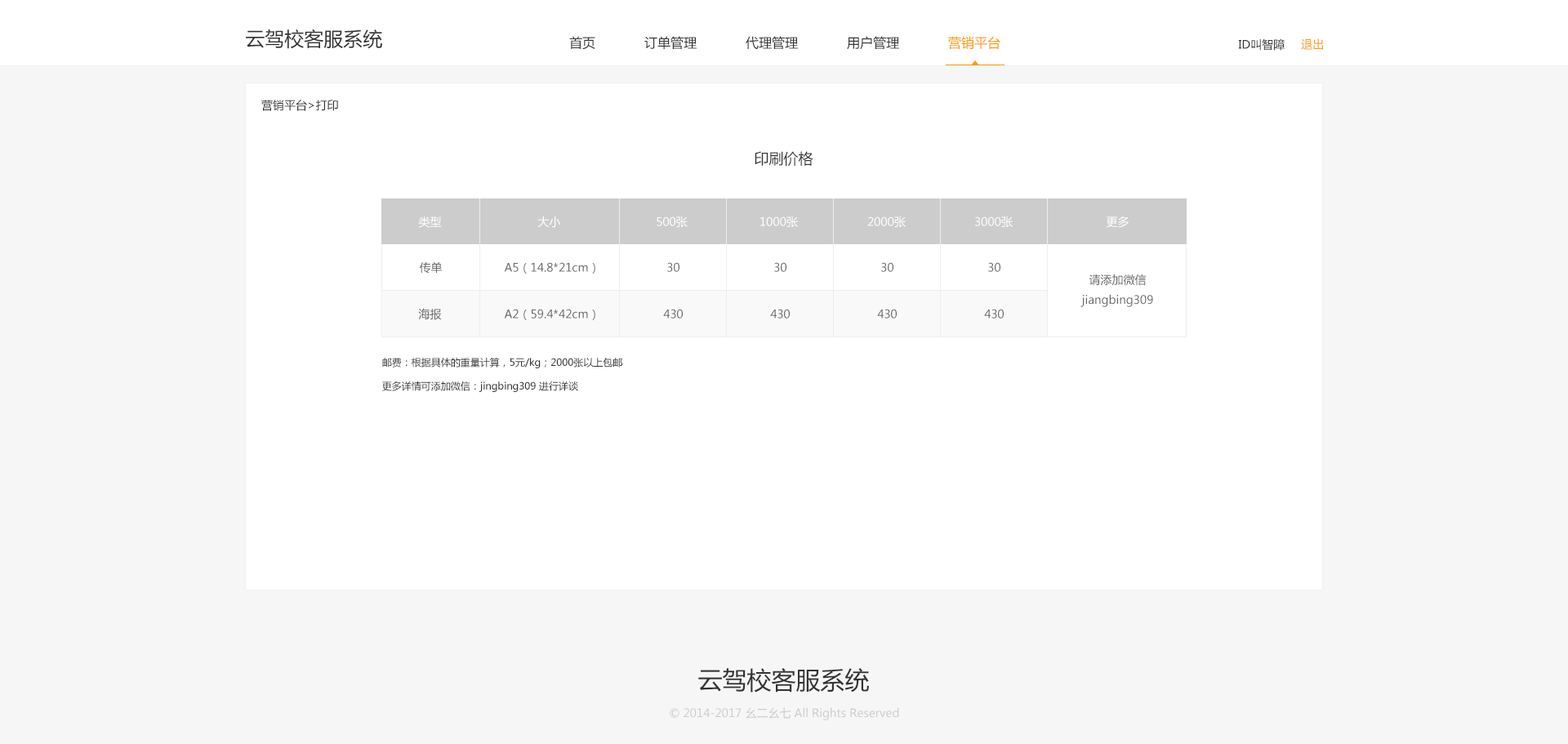
<style>
.page{position:relative;width:1568px;height:744px;background:#ffffff}
.page>*{position:absolute;margin:0}
.t1{font:19.6px "MicrosoftYaHei";color:#333333}
.t2{font:13.1px "MicrosoftYaHei";color:#333333}
.t3{font:13.1px "MicrosoftYaHei";color:#ff9900}
.t4{font:11.4px "MicrosoftYaHei";color:#333333}
.t5{font:11.4px "MicrosoftYaHei";color:#ff9900}
.t6{font:14.7px "MicrosoftYaHei";color:#333333}
.t7{font:11.4px "MicrosoftYaHei";color:#ffffff}
.t8{font:11.4px "MicrosoftYaHei";color:#666666}
.t9{font:9.8px/23.7px "MicrosoftYaHei";color:#333333}
.t10{font:24.5px "MicrosoftYaHei";color:#333333}
.t11{font:11.4px "MicrosoftYaHei";color:#cccccc}
</style>
<div class="page">
<p class="t1" style="left:246px;top:29px;width:136px;height:20px">云驾校客服系统</p>
<p class="t2" style="left:569px;top:36px;width:26px;height:14px">首页</p>
<p class="t2" style="left:644px;top:36px;width:53px;height:14px">订单管理</p>
<p class="t2" style="left:746px;top:36px;width:52px;height:13px">代理管理</p>
<p class="t2" style="left:847px;top:36px;width:52px;height:14px">用户管理</p>
<p class="t3" style="left:948px;top:36px;width:52px;height:14px">营销平台</p>
<p class="t4" style="left:1238px;top:38px;width:47px;height:13px">ID叫智障</p>
<p class="t5" style="left:1301px;top:38px;width:22px;height:12px">退出</p>
<p class="t4" style="left:261px;top:99px;width:77px;height:12px">营销平台&gt;打印</p>
<p class="t6" style="left:755px;top:151px;width:58px;height:16px">印刷价格</p>
<p class="t7" style="left:418px;top:216px;width:24px;height:12px">类型</p>
<p class="t7" style="left:537px;top:216px;width:24px;height:12px">大小</p>
<p class="t7" style="left:657px;top:216px;width:31px;height:11px">500张</p>
<p class="t7" style="left:760px;top:216px;width:38px;height:11px">1000张</p>
<p class="t7" style="left:867px;top:216px;width:39px;height:11px">2000张</p>
<p class="t7" style="left:975px;top:216px;width:38px;height:11px">3000张</p>
<p class="t7" style="left:1106px;top:216px;width:23px;height:12px">更多</p>
<p class="t8" style="left:419px;top:261px;width:23px;height:13px">传单</p>
<p class="t8" style="left:504px;top:262px;width:91px;height:12px">A5（14.8*21cm）</p>
<p class="t8" style="left:667px;top:262px;width:12px;height:10px">30</p>
<p class="t8" style="left:774px;top:262px;width:12px;height:10px">30</p>
<p class="t8" style="left:881px;top:262px;width:12px;height:10px">30</p>
<p class="t8" style="left:988px;top:262px;width:12px;height:10px">30</p>
<p class="t8" style="left:1080px;top:274px;width:73px;height:33px;text-align:center">请添加微信<br>jiangbing309</p>
<p class="t8" style="left:418px;top:308px;width:24px;height:12px">海报</p>
<p class="t8" style="left:504px;top:309px;width:91px;height:11px">A2（59.4*42cm）</p>
<p class="t8" style="left:663px;top:309px;width:20px;height:9px">430</p>
<p class="t8" style="left:770px;top:309px;width:20px;height:9px">430</p>
<p class="t8" style="left:877px;top:309px;width:20px;height:9px">430</p>
<p class="t8" style="left:984px;top:309px;width:20px;height:9px">430</p>
<p class="t9" style="left:382px;top:358px;width:240px;height:34px;text-align:justify">邮费：根据具体的重量计算，5元/kg；2000张以上包邮<br>更多详情可添加微信：jingbing309 进行详谈</p>
<p class="t10" style="left:698px;top:668px;width:171px;height:25px">云驾校客服系统</p>
<p class="t11" style="left:670px;top:707px;width:229px;height:13px">© 2014-2017 幺二幺七 All Rights Reserved</p>
</div>
